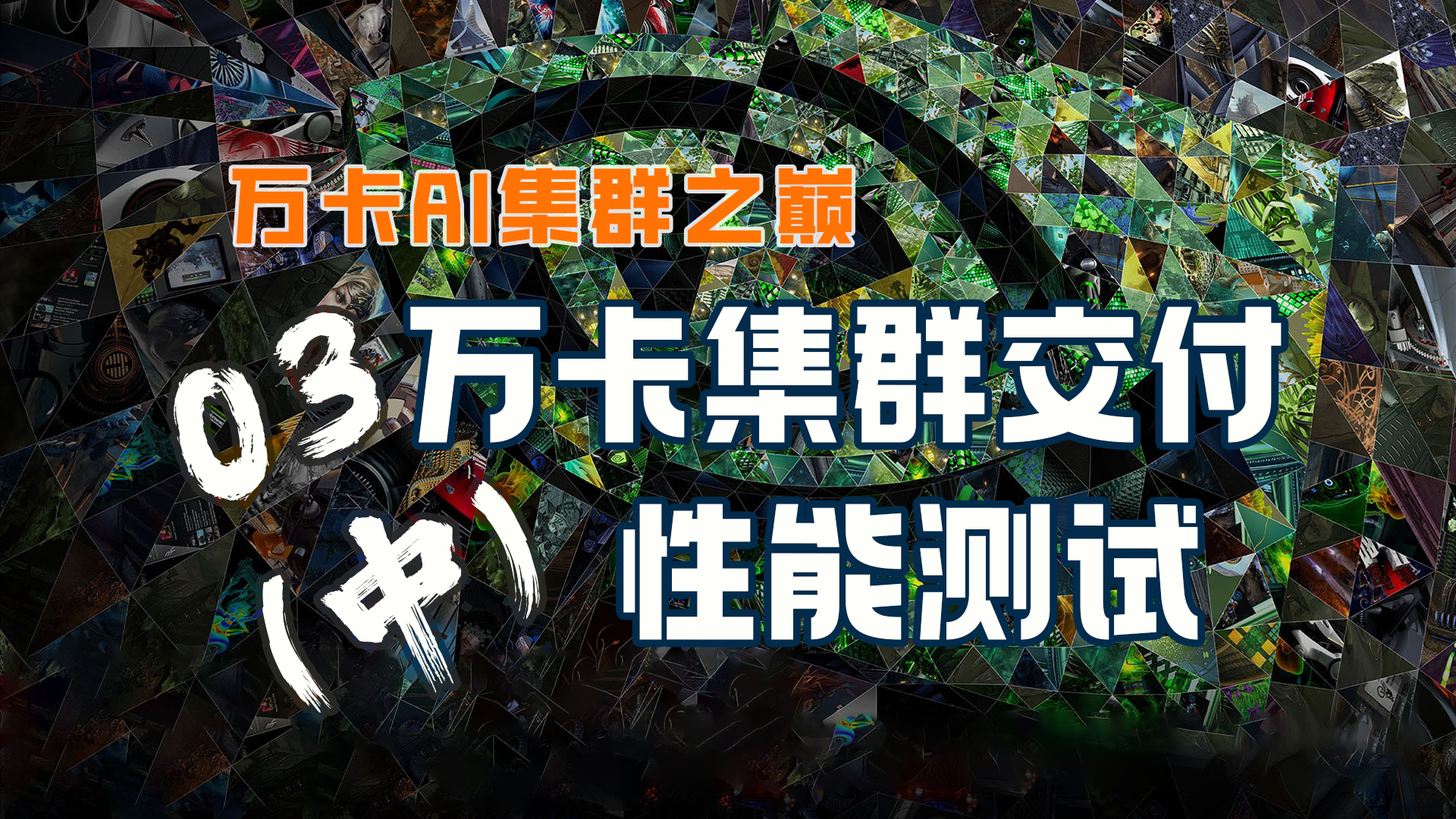
<style>
.page{position:relative;width:1456px;height:819px}
.page>*{position:absolute;margin:0}
.t1{font:83.4px "HGGTZHVF_587.000wght";letter-spacing:0.1em;color:#ff7304}
.t2{font:182px/220.5px "REEJI-CHAO-BeiMingGBT-Flash";color:#fefffa}
.t3{font:151.7px/197.2px "098-";letter-spacing:0.05em;color:#fefffa}
</style>
<div class="page">
<p class="t1" style="left:232px;top:168px;width:620px;height:76px">万卡AI集群之巅</p>
<p class="t2" style="left:173px;top:312px;width:367px;height:401px;rotate:-25deg">03<br>(中)</p>
<p class="t3" style="left:410px;top:306px;width:872px;height:334px;text-align:right">万卡集群交付<br>性能测试</p>
</div>
